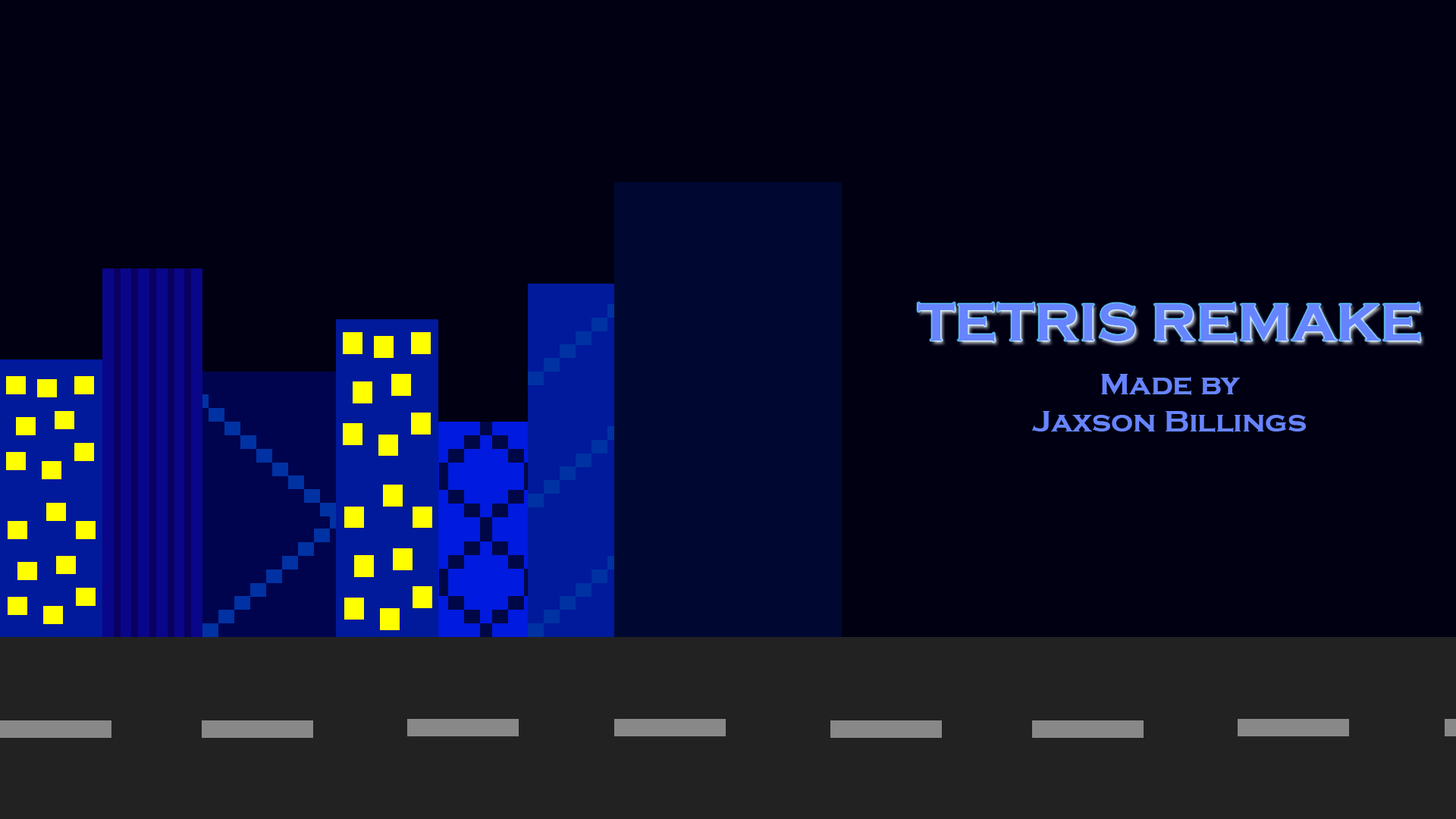
<style>
.page{position:relative;width:1456px;height:819px;background:#000012}
.page>*{position:absolute;margin:0}
.t1{font:54.6px "CopperplateGothic-Bold";color:#6784ff}
.t2{font:30.9px "CopperplateGothic-Bold";color:#6784ff}
</style>
<div class="page">
<p class="t1" style="left:918px;top:303px;width:502px;height:39px">TETRIS REMAKE</p>
<p class="t2" style="left:1032px;top:374px;width:274px;height:58px;text-align:center">Made by<br>Jaxson Billings</p>
</div>
